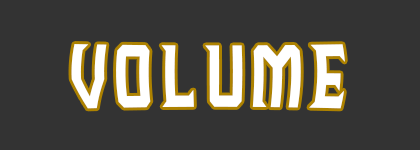
<style>
.page{position:relative;width:420px;height:150px;background:#333333}
.page>*{position:absolute;margin:0}
.t1{font:93.8px "Lorde-Havana";letter-spacing:0.1em;color:#ffffff;scale:0.75 1}
</style>
<div class="page">
<p class="t1" style="left:71px;top:44px;width:274px;height:65px">VOLUME</p>
</div>
